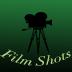
<style>
.page{position:relative;width:72px;height:72px}
.page>*{position:absolute;margin:0}
.t1{font:12px "Didot-Italic";color:#b7db8c;scale:1.1 1}
</style>
<div class="page">
<p class="t1" style="left:0px;top:49px;width:71px;height:17px">Film Shots</p>
</div>
